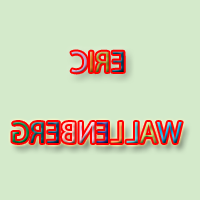
<style>
.page{position:relative;width:200px;height:200px;background:#d4eacb}
.page>*{position:absolute;margin:0}
.t1{font:30px "MyriadPro-Regular"}
</style>
<div class="page">
<p class="t1" style="left:71px;top:51px;width:53px;height:22px;rotate:180deg">ERIC</p>
<p class="t1" style="left:12px;top:122px;width:170px;height:21px;rotate:180deg">WALLENBERG</p>
</div>
